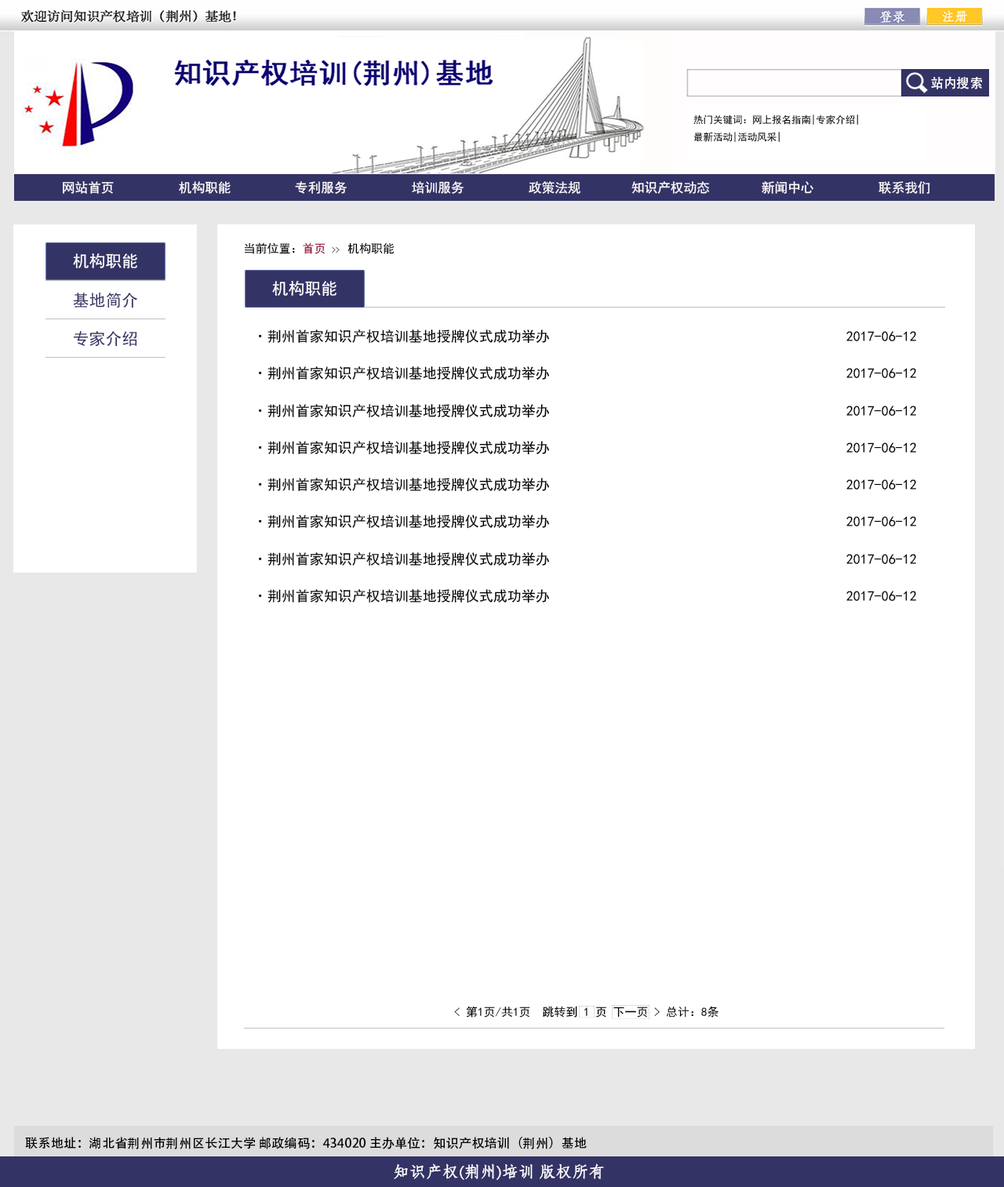
<style>
.page{position:relative;width:1004px;height:1187px;background:#ffffff}
.page>*{position:absolute;margin:0}
.t1{font:13.1px "AdobeHeitiStd-Regular";color:#ffffff}
.t2{font:9.8px "SimHei";color:#040402}
.t3{font:13.1px "SimHei";color:#fffbfc}
.t4{font:11.8px "SimHei";color:#000000}
.t5{font:11.8px "SimHei";color:#990033}
.t6{font:7.8px "SimHei";color:#000000}
.t7{font:16.3px "SimHei";color:#fdfffb}
.t8{font:16.3px "SimHei";color:#ffffff}
.t9{font:16.3px "SimHei";color:#333366}
.t10{font:14.1px "SimHei";color:#000000}
.t11{font:12.5px "AdobeHeitiStd-Regular";color:#000104}
.t12{font:15.6px "STFangsong";color:#fdfdfd;font-weight:bold}
</style>
<div class="page">
<p class="t1" style="left:931px;top:77px;width:51px;height:12px">站内搜索</p>
<p class="t2" style="left:694px;top:115px;width:164px;height:27px">热门关键词：网上报名指南|专家介绍|<br>最新活动|活动风采|</p>
<p class="t3" style="left:63px;top:181px;width:51px;height:13px">网站首页</p>
<p class="t3" style="left:179px;top:181px;width:52px;height:13px">机构职能</p>
<p class="t3" style="left:295px;top:181px;width:52px;height:13px">专利服务</p>
<p class="t3" style="left:412px;top:181px;width:52px;height:13px">培训服务</p>
<p class="t3" style="left:529px;top:181px;width:52px;height:13px">政策法规</p>
<p class="t3" style="left:632px;top:181px;width:77px;height:13px">知识产权动态</p>
<p class="t3" style="left:762px;top:181px;width:52px;height:13px">新闻中心</p>
<p class="t3" style="left:879px;top:181px;width:52px;height:13px">联系我们</p>
<p class="t4" style="left:244px;top:242px;width:151px;height:12px">当前位置：<span class="t5">首页 </span><span class="t6">&gt;&gt;  </span>机构职能</p>
<p class="t7" style="left:73px;top:253px;width:64px;height:16px">机构职能</p>
<p class="t8" style="left:272px;top:281px;width:65px;height:16px">机构职能</p>
<p class="t9" style="left:73px;top:292px;width:64px;height:16px">基地简介</p>
<p class="t10" style="left:259px;top:330px;width:658px;height:14px">·荆州首家知识产权培训基地授牌仪式成功举办                                          2017-06-12</p>
<p class="t9" style="left:73px;top:331px;width:64px;height:16px">专家介绍</p>
<p class="t10" style="left:259px;top:366px;width:658px;height:15px">·荆州首家知识产权培训基地授牌仪式成功举办                                          2017-06-12</p>
<p class="t10" style="left:259px;top:404px;width:658px;height:14px">·荆州首家知识产权培训基地授牌仪式成功举办                                          2017-06-12</p>
<p class="t10" style="left:259px;top:441px;width:658px;height:14px">·荆州首家知识产权培训基地授牌仪式成功举办                                          2017-06-12</p>
<p class="t10" style="left:259px;top:478px;width:658px;height:14px">·荆州首家知识产权培训基地授牌仪式成功举办                                          2017-06-12</p>
<p class="t10" style="left:259px;top:515px;width:658px;height:14px">·荆州首家知识产权培训基地授牌仪式成功举办                                          2017-06-12</p>
<p class="t10" style="left:259px;top:552px;width:658px;height:15px">·荆州首家知识产权培训基地授牌仪式成功举办                                          2017-06-12</p>
<p class="t10" style="left:259px;top:589px;width:658px;height:14px">·荆州首家知识产权培训基地授牌仪式成功举办                                          2017-06-12</p>
<p class="t4" style="left:454px;top:1006px;width:265px;height:12px">&lt; 第1页/共1页  跳转到 1 页 下一页 &gt; 总计：8条</p>
<p class="t11" style="left:25px;top:1137px;width:562px;height:13px">联系地址：湖北省荆州市荆州区长江大学 邮政编码：434020 主办单位：知识产权培训（荆州）基地</p>
<p class="t12" style="left:394px;top:1164px;width:210px;height:16px">知识产权(荆州)培训 版权所有</p>
</div>
